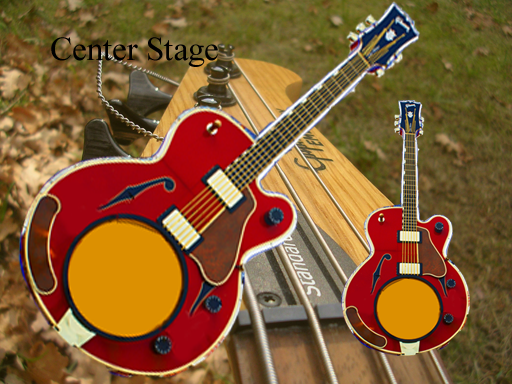
<style>
.page{position:relative;width:512px;height:384px}
.page>*{position:absolute;margin:0}
.t1{font:33.3px "TimesNewRomanPSMT";color:#000000}
</style>
<div class="page">
<p class="t1" style="left:51px;top:37px;width:167px;height:30px">Center Stage</p>
</div>
